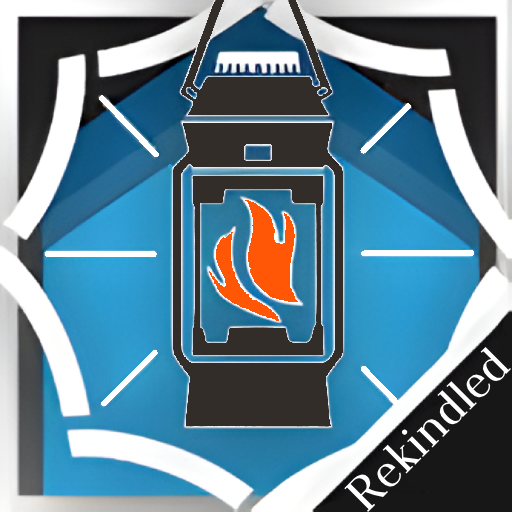
<style>
.page{position:relative;width:512px;height:512px}
.page>*{position:absolute;margin:0}
.t1{font:47.1px "DustismoRoman";color:#ffffff}
</style>
<div class="page">
<p class="t1" style="left:344px;top:347px;width:167px;height:165px;rotate:-45deg">Rekindled</p>
</div>
